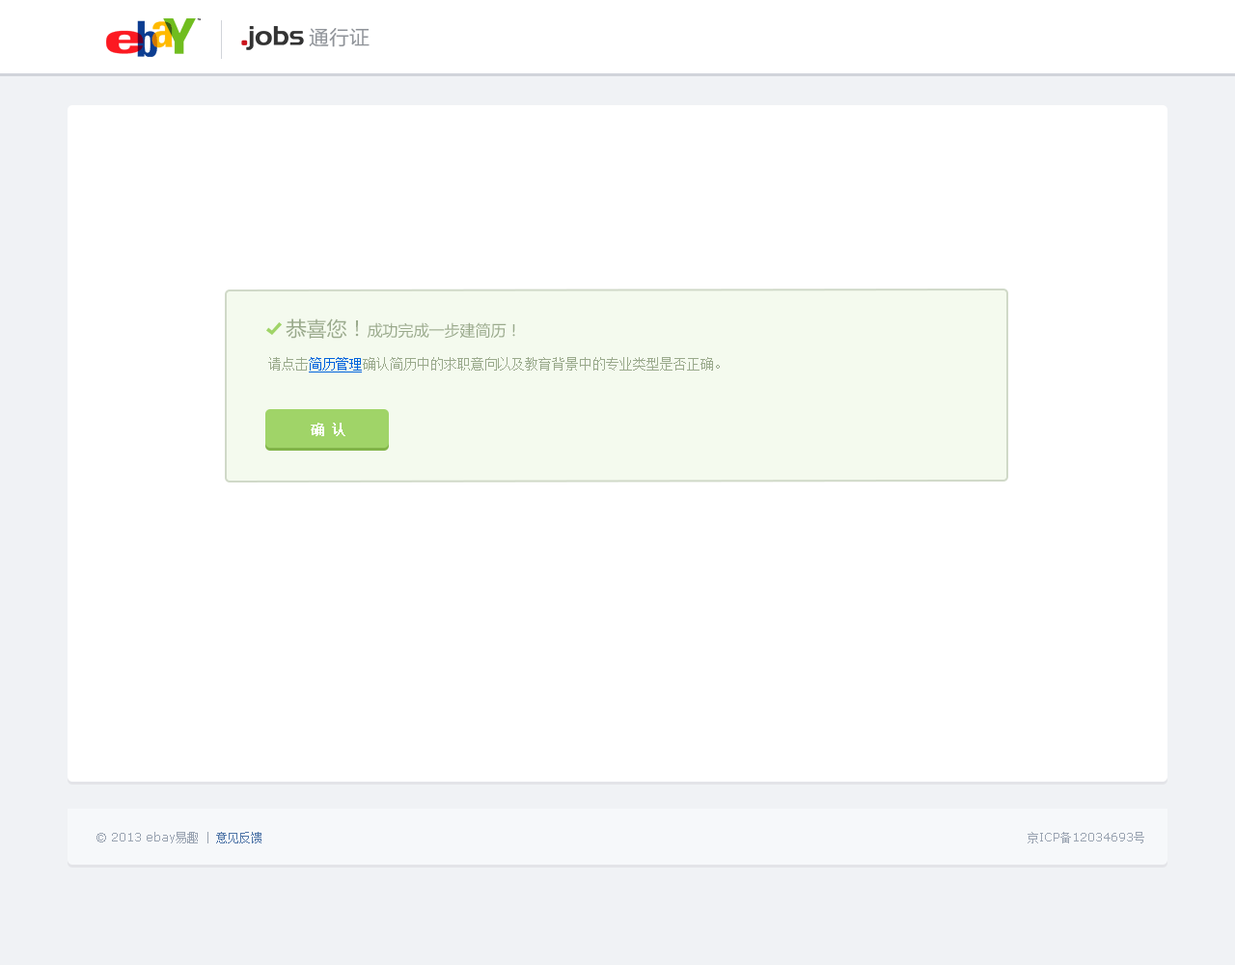
<style>
.page{position:relative;width:1235px;height:965px;background:#ffffff}
.page>*{position:absolute;margin:0}
.t1{font:20.3px "FZLTHJW--GB1-0";color:#8f9399}
.t2{font:15.4px "MicrosoftYaHei";color:#9aaa8c}
.t3{font:20.3px "MicrosoftYaHei";color:#9aaa8c}
.t4{font:13.5px "SimSun";color:#9aaa8c}
.t5{font:13.5px "SimSun";color:#0063dc}
.t6{font:13.5px "SimSun";color:#ffffff;text-transform:uppercase;font-weight:bold}
.t7{font:11.6px "Verdana";color:#99a3b1}
.t8{font:11.6px "SimSun";color:#99a3b1}
.t9{font:11.6px "SimSun";color:#5076a8}
</style>
<div class="page">
<p class="t1" style="left:309px;top:28px;width:61px;height:19px">通行证</p>
<p class="t2" style="left:286px;top:319px;width:229px;height:20px"><span class="t3">恭喜您！</span>成功完成一步建简历！</p>
<p class="t4" style="left:268px;top:357px;width:452px;height:14px">请点击<span class="t5">简历管理</span>确认简历中的求职意向以及教育背景中的专业类型是否正确。</p>
<p class="t6" style="left:311px;top:423px;width:35px;height:13px">确 认</p>
<p class="t7" style="left:97px;top:832px;width:165px;height:12px">© 2013 ebay<span class="t8">易趣</span><span class="t8"> | </span><span class="t9">意见反馈</span></p>
<p class="t7" style="left:1028px;top:832px;width:117px;height:12px"><span class="t8">京</span>ICP<span class="t8">备</span>12034693<span class="t8">号</span></p>
</div>
